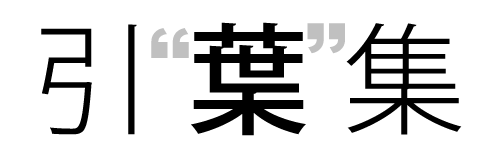
<style>
.page{position:relative;width:500px;height:150px;background:#ffffff}
.page>*{position:absolute;margin:0}
.t1{font:120px "KozGoPro-Light";letter-spacing:0.3em;color:#000000}
.t2{font:120px "KozGoPro-Medium";letter-spacing:0.3em;color:#000000}
</style>
<div class="page">
<p class="t1" style="left:41px;top:22px;width:421px;height:114px">引<span class="t2">葉</span>集</p>
</div>
